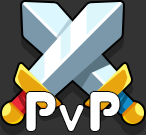
<style>
.page{position:relative;width:146px;height:135px;background:#333333}
.page>*{position:absolute;margin:0}
.t1{font:57.6px "Junegull-Regular";letter-spacing:-0.03em;color:#ffffff}
.t2{font:57.6px "Junegull-Regular";letter-spacing:-0.03em;color:#ffffff;font-variant:small-caps}
</style>
<div class="page">
<p class="t1" style="left:25px;top:91px;width:32px;height:41px">P</p>
<p class="t1" style="left:89px;top:91px;width:32px;height:41px">P</p>
<p class="t2" style="left:58px;top:104px;width:27px;height:28px">v</p>
</div>
